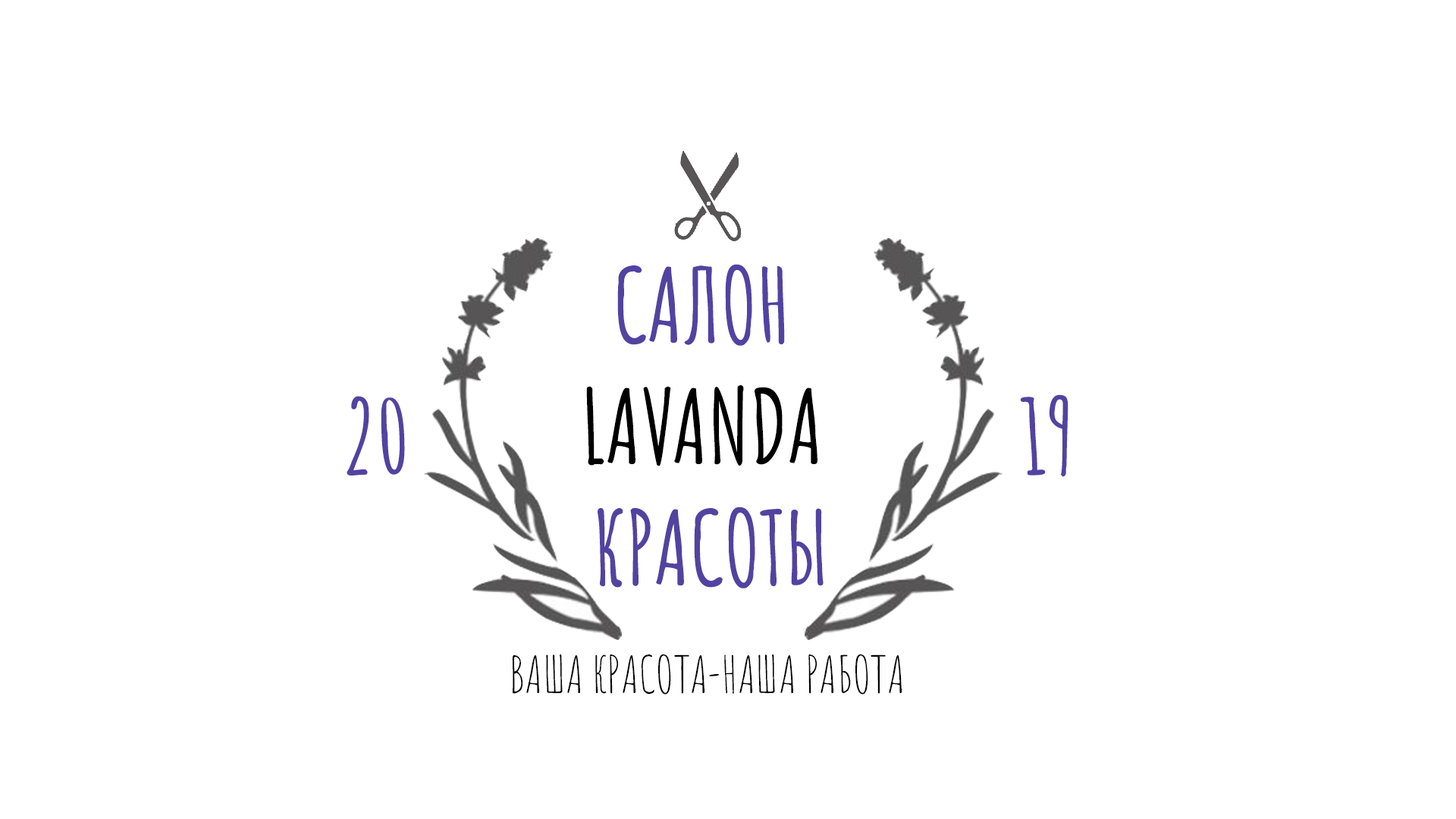
<style>
.page{position:relative;width:1456px;height:819px;background:#ffffff}
.page>*{position:absolute;margin:0}
.t1{font:101.1px "AmaticSC-Bold";color:#000000}
.t2{font:101.1px "AmaticSC-Bold";color:#5243a1}
.t3{font:50.6px "AmaticSC-Regular";color:#000000}
</style>
<div class="page">
<p class="t1" style="left:586px;top:264px;width:238px;height:324px;text-align:center"><span class="t2">САЛОН <br></span>LAVANDA <br><span class="t2">КРАСОТЫ</span></p>
<p class="t2" style="left:347px;top:394px;width:721px;height:83px">20                                 19</p>
<p class="t3" style="left:512px;top:654px;width:390px;height:41px">ВАША КРАСОТА-НАША РАБОТА</p>
</div>
